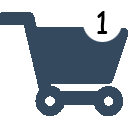
<style>
.page{position:relative;width:128px;height:128px;background:#ffffff}
.page>*{position:absolute;margin:0}
.t1{font:31.5px "ComicSansMS";letter-spacing:-0.05em;color:#000000}
</style>
<div class="page">
<p class="t1" style="left:97px;top:11px;width:11px;height:23px">1</p>
</div>
